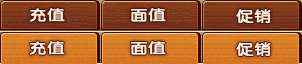
<style>
.page{position:relative;width:302px;height:64px}
.page>*{position:absolute;margin:0}
.t1{font:14px "HYe3gj";letter-spacing:0.05em;color:#ffeee1;font-weight:bold;scale:1.2 1}
</style>
<div class="page">
<p class="t1" style="left:29px;top:8px;width:36px;height:14px">充值</p>
<p class="t1" style="left:131px;top:8px;width:35px;height:14px">面值</p>
<p class="t1" style="left:236px;top:9px;width:35px;height:14px">促销</p>
<p class="t1" style="left:29px;top:41px;width:36px;height:14px">充值</p>
<p class="t1" style="left:131px;top:41px;width:35px;height:14px">面值</p>
<p class="t1" style="left:236px;top:42px;width:35px;height:14px">促销</p>
</div>
